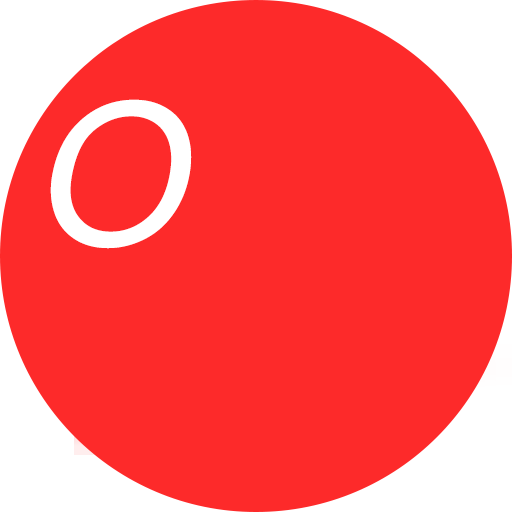
<style>
.page{position:relative;width:512px;height:512px;background:#fd2a2a}
.page>*{position:absolute;margin:0}
.t1{font:200px "ArialMT";letter-spacing:0.025em;color:#ffffff;font-style:italic}
</style>
<div class="page">
<p class="t1" style="left:50px;top:99px;width:142px;height:150px">O</p>
</div>
